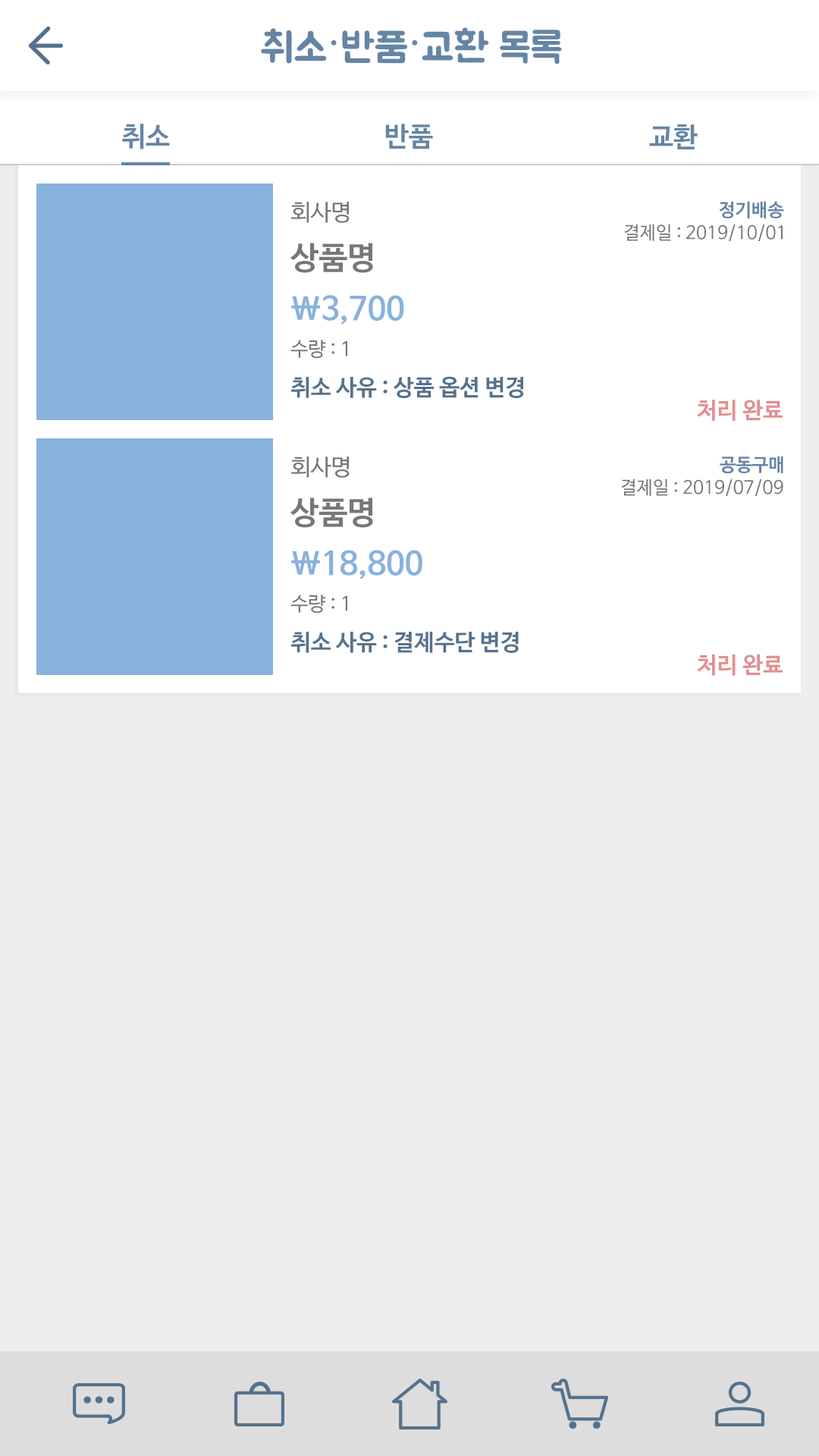
<style>
.page{position:relative;width:819px;height:1456px;background:#eeeeee}
.page>*{position:absolute;margin:0}
.t1{font:40.9px "BMJUA";color:#6585a5}
.t2{font:40.9px "OSeongandHanEum-Regular";color:#6585a5}
.t3{font:27.3px "NanumBarunGothicBold";color:#6585a5}
.t4{font:22.7px "NanumBarunGothic";color:#777777}
.t5{font:18.2px "NanumBarunGothicBold";color:#6585a5}
.t6{font:18.2px "NanumBarunGothic";color:#777777}
.t7{font:31.8px "NanumBarunGothicBold";color:#777777}
.t8{font:31.8px "NanumBarunGothicBold";color:#88b2dc}
.t9{font:19.7px "NanumBarunGothic";color:#777777}
.t10{font:22.7px "NanumBarunGothicBold";color:#54728c}
.t11{font:22.7px "NanumBarunGothicBold";color:#e28f8f}
</style>
<div class="page">
<p class="t1" style="left:261px;top:27px;width:301px;height:37px">취소<span class="t2">·</span>반품<span class="t2">·</span>교환 목록</p>
<p class="t3" style="left:122px;top:124px;width:48px;height:25px">취소</p>
<p class="t3" style="left:385px;top:124px;width:48px;height:25px">반품</p>
<p class="t3" style="left:649px;top:124px;width:49px;height:25px">교환</p>
<p class="t4" style="left:291px;top:202px;width:59px;height:21px">회사명</p>
<p class="t5" style="left:719px;top:201px;width:65px;height:17px">정기배송</p>
<p class="t6" style="left:624px;top:224px;width:159px;height:17px">결제일 : 2019/10/01</p>
<p class="t7" style="left:290px;top:243px;width:83px;height:30px">상품명</p>
<p class="t8" style="left:291px;top:295px;width:113px;height:30px">\3,700</p>
<p class="t9" style="left:290px;top:340px;width:57px;height:19px">수량 : 1</p>
<p class="t10" style="left:291px;top:376px;width:233px;height:22px">취소 사유 : 상품 옵션 변경</p>
<p class="t11" style="left:697px;top:400px;width:86px;height:21px">처리 완료</p>
<p class="t4" style="left:291px;top:457px;width:59px;height:21px">회사명</p>
<p class="t5" style="left:720px;top:456px;width:63px;height:18px">공동구매</p>
<p class="t6" style="left:621px;top:479px;width:162px;height:17px">결제일 : 2019/07/09</p>
<p class="t7" style="left:290px;top:497px;width:83px;height:31px">상품명</p>
<p class="t8" style="left:291px;top:550px;width:131px;height:29px">\18,800</p>
<p class="t9" style="left:290px;top:595px;width:57px;height:18px">수량 : 1</p>
<p class="t10" style="left:291px;top:632px;width:228px;height:21px">취소 사유 : 결제수단 변경</p>
<p class="t11" style="left:697px;top:654px;width:86px;height:22px">처리 완료</p>
</div>
